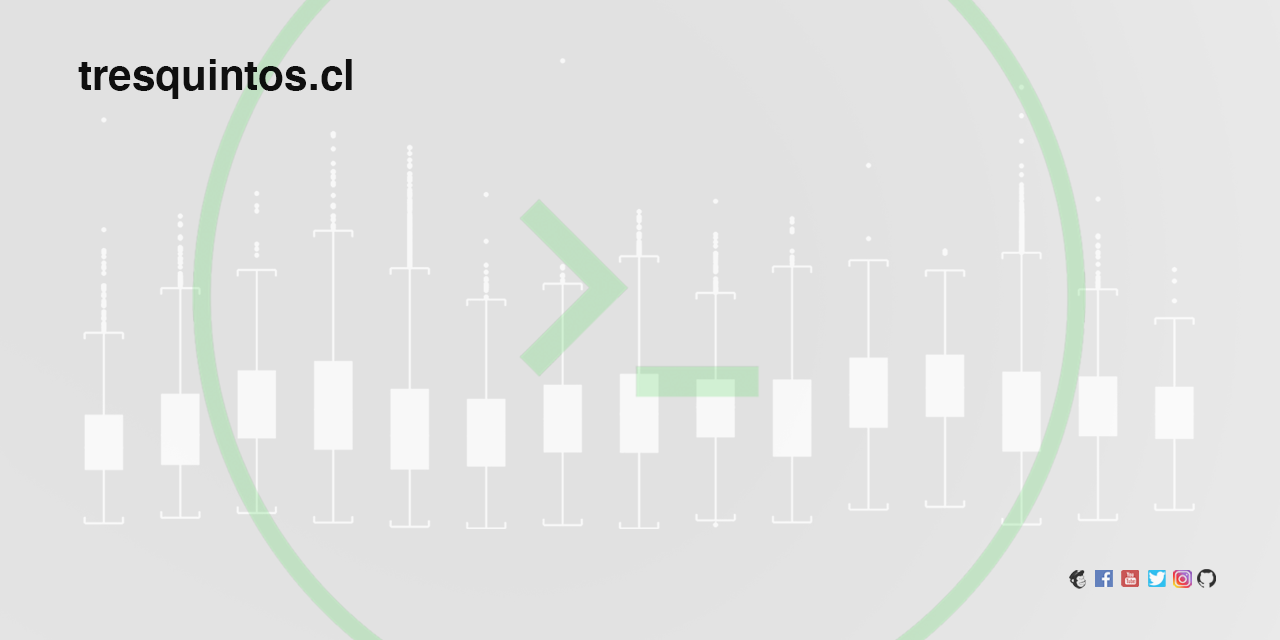
<style>
.page{position:relative;width:1280px;height:640px;background:#e1e1e1}
.page>*{position:absolute;margin:0}
.t1{font:42.3px "Helvetica-Bold";color:#000000}
</style>
<div class="page">
<p class="t1" style="left:78px;top:59px;width:274px;height:40px;opacity:0.97">tresquintos.cl</p>
</div>
